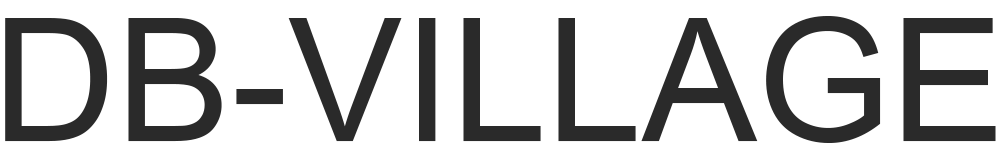
<style>
.page{position:relative;width:1000px;height:152px;background:#ffffff}
.page>*{position:absolute;margin:0}
.t1{font:171.9px "ArialMT";color:#2a2a2a;text-transform:uppercase}
</style>
<div class="page">
<p class="t1" style="left:5px;top:16px;width:991px;height:127px">DB-VILLAGE</p>
</div>
